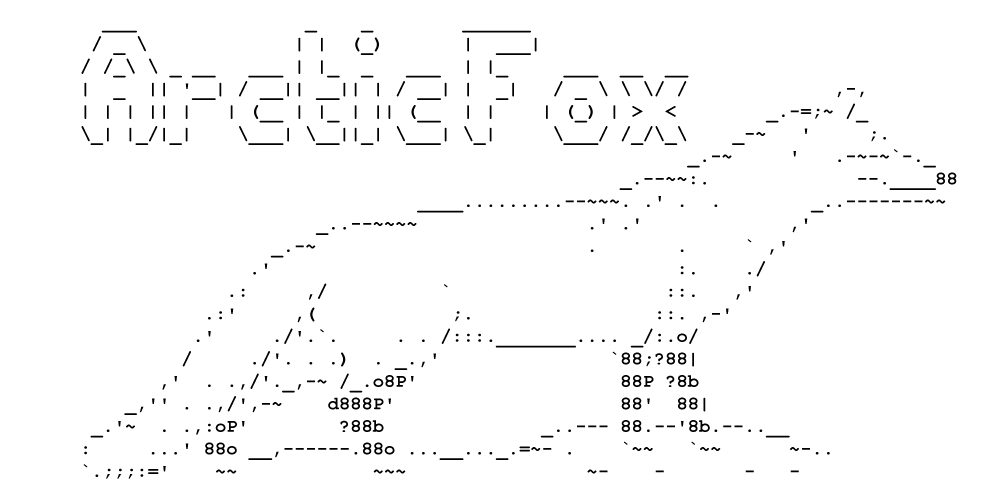
<style>
.page{position:relative;width:1000px;height:500px;background:#ffffff}
.page>*{position:absolute;margin:0}
.t1{font:18.8px "CourierNewPS-BoldMT";color:#000000}
</style>
<div class="page">
<p class="t1" style="left:81px;top:30px;width:876px;height:449px">___               _    _        ______              <br>       / _ \             | |  (_)       |  ___|             <br>      / /_\ \ _ __   ___ | |_  _   ___  | |_     ___  __  __<br>      |  _  || '__| / __|| __|| | / __| |  _|   / _ \ \ \/ /             ,-,<br>      | | | || |   | (__ | |_ | || (__  | |    | (_) | &gt;  &lt;        _.-=;~ /_<br>      \_| |_/|_|    \___| \__||_| \___| \_|     \___/ /_/\_\    _-~   '     ;.<br>                                                            _.-~     '   .-~-~`-._<br>                                                      _.--~~:.             --.____88<br>                                    ____.........--~~~. .' .  .        _..-------~~<br>                           _..--~~~~               .' .'             ,'<br>                       _.-~                        .       .     ` ,'<br>                     .'                                    :.    ./<br>                   .:     ,/          `                   ::.   ,'<br>                 .:'     ,(            ;.                ::. ,-'<br>                .'     ./'.`.     . . /:::._______.... _/:.o/<br>               /     ./'. . .)  . _.,'               `88;?88|<br>             ,'  . .,/'._,-~ /_.o8P'                  88P ?8b<br>          _,'' . .,/',-~    d888P'                    88'  88|<br>       _.'~  . .,:oP'        ?88b              _..--- 88.--'8b.--..__<br>      :     ...' 88o __,------.88o ...__..._.=~- .    `~~   `~~      ~-..<br>      `.;;;:='    ~~            ~~~                ~-    -       -   -</p>
</div>
